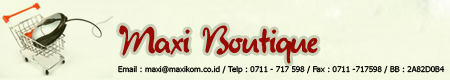
<style>
.page{position:relative;width:450px;height:80px}
.page>*{position:absolute;margin:0}
.t1{font:27.1px "Juliet";color:#950b04}
.t2{font:8px "Tahoma";color:#030303}
</style>
<div class="page">
<p class="t1" style="left:119px;top:25px;width:199px;height:39px">Maxi Boutique</p>
<p class="t2" style="left:118px;top:65px;width:327px;height:9px">Email : maxi@maxikom.co.id / Telp : 0711 - 717 598 / Fax : 0711 -717598 / BB : 2A82D0B4</p>
</div>
